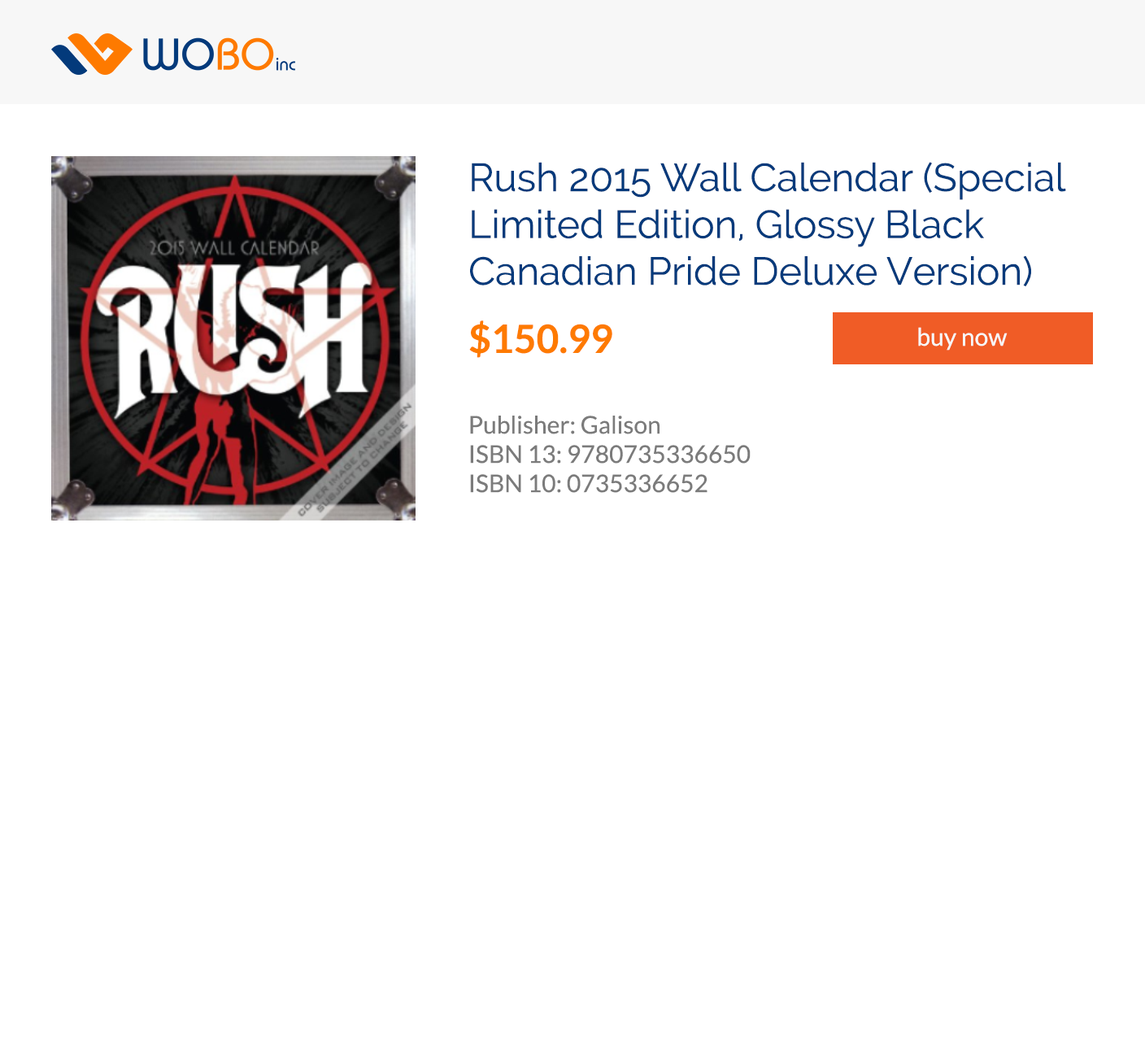
<style>
.page{position:relative;width:1145px;height:1041px;background:#ffffff}
.page>*{position:absolute;margin:0}
.t1{font:39px "Raleway";color:#033a7b}
.t2{font:39px "Lato-Bold";color:#fe7a00}
.t3{font:24.4px "Lato-Regular";color:#f7f7f7}
.t4{font:24.4px "Lato-Regular";color:#7b7b7b}
</style>
<div class="page">
<p class="t1" style="left:470px;top:162px;width:596px;height:125px">Rush 2015 Wall Calendar (Special Limited Edition, Glossy Black Canadian Pride Deluxe Version)</p>
<p class="t2" style="left:469px;top:320px;width:143px;height:38px">$150.99</p>
<p class="t3" style="left:918px;top:327px;width:90px;height:24px">buy now</p>
<p class="t4" style="left:470px;top:416px;width:281px;height:77px">Publisher: Galison<br>ISBN 13: 9780735336650<br>ISBN 10: 0735336652</p>
</div>
